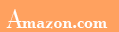
<style>
.page{position:relative;width:119px;height:32px;background:#ffa15f}
.page>*{position:absolute;margin:0}
.t1{font:24px "MonaLisaSolidITCTT";color:#fefefe}
</style>
<div class="page">
<p class="t1" style="left:6px;top:9px;width:102px;height:20px">Amazon.com</p>
</div>
